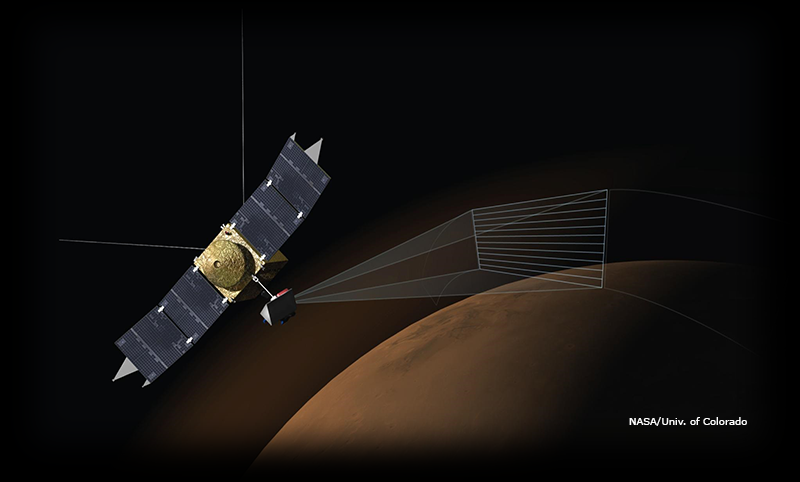
<style>
.page{position:relative;width:800px;height:482px;background:#060709}
.page>*{position:absolute;margin:0}
.t1{font:10px "Verdana";color:#ffffff}
</style>
<div class="page">
<p class="t1" style="left:629px;top:417px;width:118px;height:9px">NASA/Univ. of Colorado</p>
</div>
